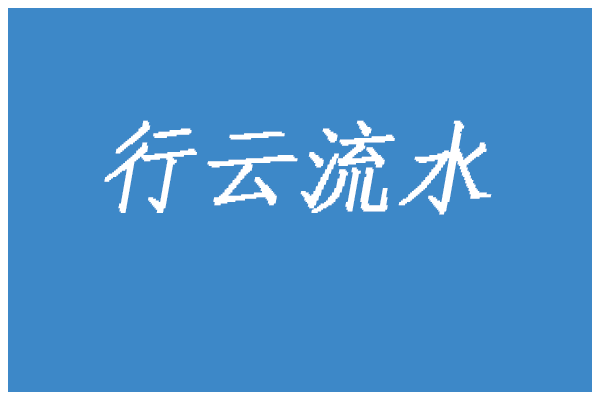
<style>
.page{position:relative;width:600px;height:400px;background:#3d88c8}
.page>*{position:absolute;margin:0}
.t1{font:100px "·ÂËÎ";color:#ffffff;font-weight:bold;font-style:italic}
</style>
<div class="page">
<p class="t1" style="left:104px;top:120px;width:388px;height:95px">行云流水</p>
</div>
